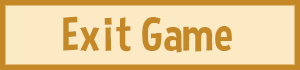
<style>
.page{position:relative;width:300px;height:70px;background:#fceac5}
.page>*{position:absolute;margin:0}
.t1{font:48px "CurseCasualRegular";color:#c48827}
</style>
<div class="page">
<p class="t1" style="left:63px;top:16px;width:169px;height:37px">Exit Game</p>
</div>
